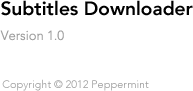
<style>
.page{position:relative;width:193px;height:91px;background:#ffffff}
.page>*{position:absolute;margin:0}
.t1{font:19px "Avenir-Heavy";color:#000000}
.t2{font:13px "Avenir-Light";color:#9e9e9e}
.t3{font:11px "Avenir-Light";color:#9e9e9e}
</style>
<div class="page">
<p class="t1" style="left:1px;top:0px;width:192px;height:16px">Subtitles Downloader</p>
<p class="t2" style="left:0px;top:30px;width:64px;height:11px">Version 1.0</p>
<p class="t3" style="left:2px;top:79px;width:147px;height:12px">Copyright © 2012 Peppermint</p>
</div>
